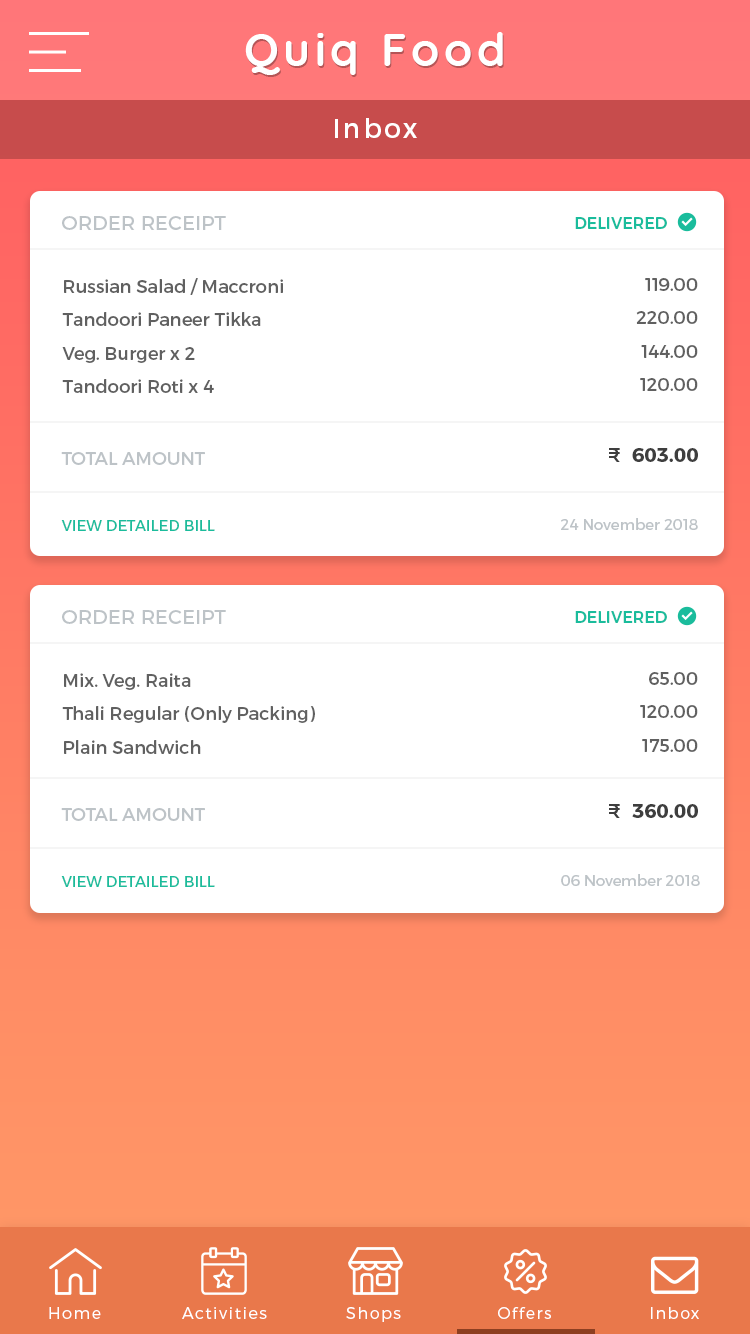
<style>
.page{position:relative;width:750px;height:1334px;background:#ffffff}
.page>*{position:absolute;margin:0}
.t1{font:46px "Quicksand-Bold";letter-spacing:0.1em;color:#ffffff}
.t2{font:27px "Montserrat-Regular";letter-spacing:0.1em;color:#ffffff}
.t3{font:20px "Montserrat-Regular";color:#bdc3c7;text-transform:uppercase}
.t4{font:16px "Montserrat-Medium";color:#1abc9c;text-transform:uppercase}
.t5{font:18px/33.4px "Montserrat-Regular";color:#606060}
.t6{font:20px "Montserrat-Bold";color:#3e3e3e}
.t7{font:20px "Montserrat-Medium";color:#3e3e3e}
.t8{font:18px "Montserrat-Regular";color:#bdc3c7;text-transform:uppercase}
.t9{font:15px "Montserrat-Regular";color:#1abc9c;text-transform:uppercase}
.t10{font:15px "Montserrat-Regular";color:#bdc3c7}
.t11{font:16px "Montserrat-Light";letter-spacing:0.1em;color:#ffffff}
</style>
<div class="page">
<p class="t1" style="left:245px;top:32px;width:258px;height:43px">Quiq Food</p>
<p class="t2" style="left:335px;top:118px;width:82px;height:20px">Inbox</p>
<p class="t3" style="left:62px;top:216px;width:164px;height:14px">Order Receipt</p>
<p class="t4" style="left:575px;top:217px;width:92px;height:12px">Delivered</p>
<p class="t5" style="left:62px;top:278px;width:221px;height:115px">Russian Salad / Maccroni<br>Tandoori Paneer Tikka<br>Veg. Burger x 2<br>Tandoori Roti x 4</p>
<p class="t5" style="left:636px;top:278px;width:62px;height:113px;text-align:right">119.00<br>220.00<br>144.00<br>120.00</p>
<p class="t6" style="left:609px;top:448px;width:89px;height:14px"><span class="t7">₹</span>  603.00</p>
<p class="t8" style="left:61px;top:452px;width:144px;height:13px">Total Amount</p>
<p class="t9" style="left:61px;top:520px;width:154px;height:11px">View Detailed Bill</p>
<p class="t10" style="left:561px;top:518px;width:137px;height:12px">24 November 2018</p>
<p class="t3" style="left:62px;top:610px;width:164px;height:14px">Order Receipt</p>
<p class="t4" style="left:575px;top:611px;width:92px;height:12px">Delivered</p>
<p class="t5" style="left:62px;top:673px;width:253px;height:81px">Mix. Veg. Raita<br>Thali Regular (Only Packing)<br>Plain Sandwich</p>
<p class="t5" style="left:640px;top:672px;width:58px;height:80px;text-align:right">65.00<br>120.00<br>175.00</p>
<p class="t8" style="left:61px;top:808px;width:144px;height:13px">Total Amount</p>
<p class="t6" style="left:609px;top:804px;width:89px;height:14px"><span class="t7">₹</span>  360.00</p>
<p class="t9" style="left:61px;top:876px;width:154px;height:11px">View Detailed Bill</p>
<p class="t10" style="left:561px;top:874px;width:139px;height:12px">06 November 2018</p>
<p class="t11" style="left:49px;top:1307px;width:52px;height:12px">Home</p>
<p class="t11" style="left:182px;top:1307px;width:85px;height:12px">Activities</p>
<p class="t11" style="left:346px;top:1307px;width:55px;height:15px">Shops</p>
<p class="t11" style="left:498px;top:1307px;width:53px;height:12px">Offers</p>
<p class="t11" style="left:651px;top:1307px;width:48px;height:12px">Inbox</p>
</div>
